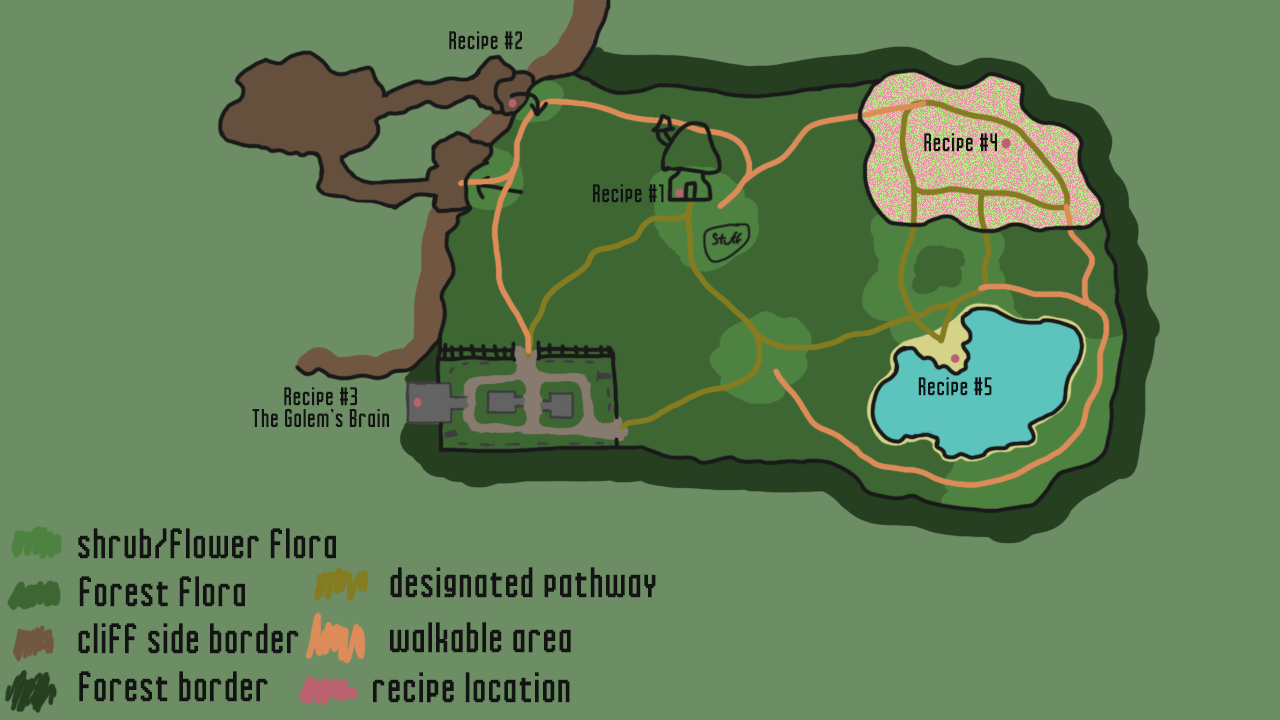
<style>
.page{position:relative;width:1280px;height:720px;background:#6d8e65}
.page>*{position:absolute;margin:0}
.t1{font:18px "Inky-Thin-Pixels";letter-spacing:0.075em;color:#131313}
.t2{font:30px "Inky-Thin-Pixels";letter-spacing:0.075em;color:#131313}
</style>
<div class="page">
<p class="t1" style="left:449px;top:31px;width:73px;height:19px">Recipe #2</p>
<p class="t1" style="left:924px;top:133px;width:73px;height:19px">Recipe #4</p>
<p class="t1" style="left:593px;top:184px;width:71px;height:19px">Recipe #1</p>
<p class="t1" style="left:918px;top:377px;width:74px;height:19px">Recipe #5</p>
<p class="t1" style="left:252px;top:387px;width:137px;height:40px;text-align:center">Recipe #3<br>The Golem’s Brain</p>
<p class="t2" style="left:78px;top:528px;width:258px;height:31px">shrub/flower flora</p>
<p class="t2" style="left:390px;top:567px;width:266px;height:31px">designated pathway</p>
<p class="t2" style="left:79px;top:576px;width:166px;height:31px">forest flora</p>
<p class="t2" style="left:78px;top:623px;width:221px;height:31px">cliff side border</p>
<p class="t2" style="left:390px;top:622px;width:181px;height:31px">walkable area</p>
<p class="t2" style="left:79px;top:671px;width:189px;height:31px">forest border</p>
<p class="t2" style="left:373px;top:672px;width:197px;height:31px">recipe location</p>
</div>
